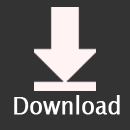
<style>
.page{position:relative;width:130px;height:130px;background:#333333}
.page>*{position:absolute;margin:0}
.t1{font:24px "LucidaSansUnicode";color:#ffffff;font-weight:bold;scale:0.9 1}
</style>
<div class="page">
<p class="t1" style="left:14px;top:95px;width:106px;height:20px">Download</p>
</div>
